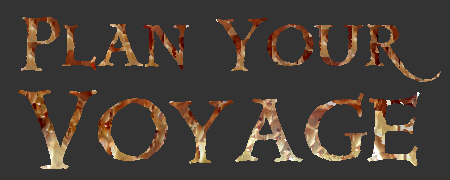
<style>
.page{position:relative;width:450px;height:180px;background:#333333}
.page>*{position:absolute;margin:0}
.t1{font:66.7px "Windlass"}
.t2{font:100px "Windlass"}
</style>
<div class="page">
<p class="t1" style="left:21px;top:17px;width:420px;height:65px">Plan Your</p>
<p class="t2" style="left:18px;top:90px;width:402px;height:79px">Voyage</p>
</div>
